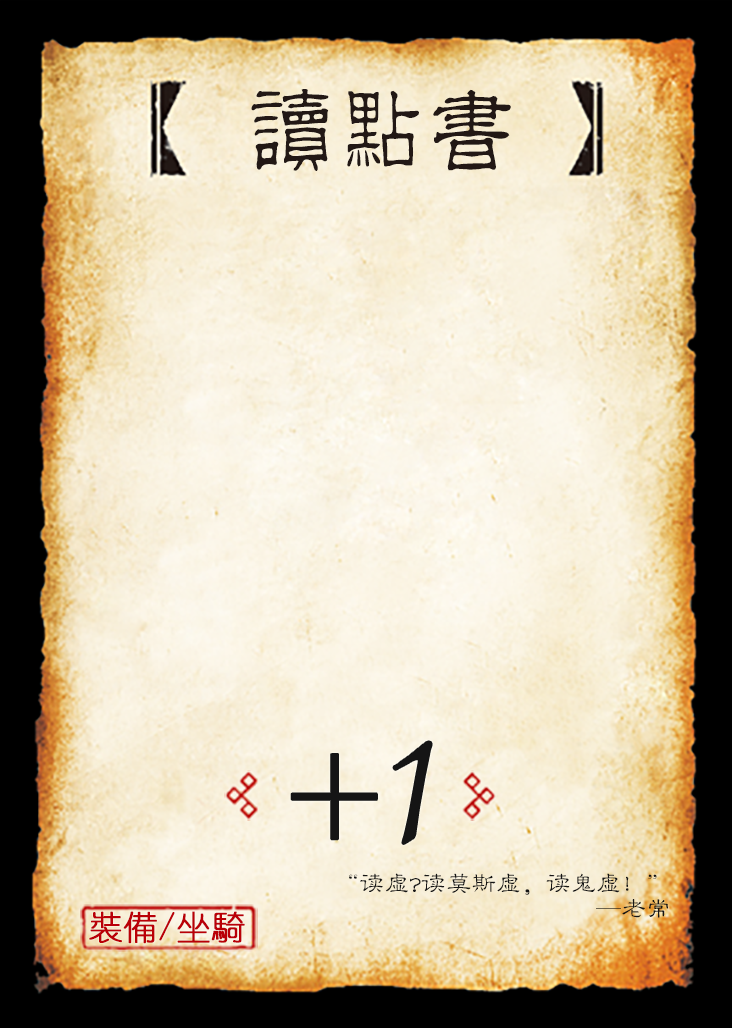
<style>
.page{position:relative;width:732px;height:1028px}
.page>*{position:absolute;margin:0}
.t1{font:95.8px "JMFLS_GBK";color:#221815;scale:0.95 1}
.t2{font:191.7px "Jxixinkai";color:#151515}
.t3{font:141.7px "Jxixinkai";color:#151515}
.t4{font:25px/25px "FZLBJW--GB1-0";color:#151515}
.t5{font:33.3px "YouYuan";color:#ba0007;font-weight:bold}
</style>
<div class="page">
<p class="t1" style="left:251px;top:89px;width:260px;height:82px">讀點書</p>
<p class="t2" style="left:393px;top:741px;width:39px;height:103px">1</p>
<p class="t3" style="left:291px;top:754px;width:86px;height:86px">+</p>
<p class="t4" style="left:349px;top:873px;width:319px;height:45px;text-align:right">“读虚?读莫斯虚，读鬼虚！”<br>—老常</p>
<p class="t5" style="left:89px;top:911px;width:156px;height:33px">裝備/坐騎</p>
</div>
